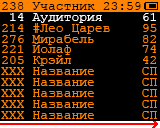
<style>
.page{position:relative;width:160px;height:128px;background:#000000}
.page>*{position:absolute;margin:0}
.t1{font:13px "CourierNewPSMT";color:#000000}
.t2{font:13px "CourierNewPSMT";color:#ffffff}
.t3{font:13px "CourierNewPSMT";color:#ff8300}
</style>
<div class="page">
<p class="t1" style="left:2px;top:2px;width:139px;height:8px">238 Участник 23:59</p>
<p class="t2" style="left:10px;top:13px;width:146px;height:10px">14 Аудитория     61</p>
<p class="t3" style="left:2px;top:23px;width:155px;height:11px">214 #Лео Царев    95</p>
<p class="t3" style="left:2px;top:34px;width:154px;height:11px">276 Мирабель      82</p>
<p class="t3" style="left:2px;top:42px;width:154px;height:13px">221 Йолаф         74</p>
<p class="t3" style="left:2px;top:55px;width:154px;height:11px">205 Крэйл         42</p>
<p class="t3" style="left:1px;top:78px;width:156px;height:8px">ХХХ Название      СП</p>
<p class="t3" style="left:1px;top:67px;width:156px;height:8px">ХХХ Название      СП</p>
<p class="t3" style="left:1px;top:89px;width:156px;height:8px">ХХХ Название      СП</p>
<p class="t3" style="left:1px;top:100px;width:156px;height:8px">ХХХ Название      СП</p>
<p class="t3" style="left:1px;top:111px;width:156px;height:8px">ХХХ Название      СП</p>
</div>
